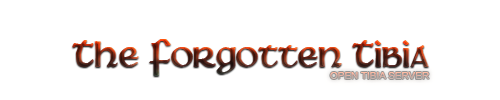
<style>
.page{position:relative;width:500px;height:100px;background:#ffffff}
.page>*{position:absolute;margin:0}
.t1{font:40px "Martel"}
.t2{font:9px "ArialMT";text-transform:uppercase;scale:1.11 1}
</style>
<div class="page">
<p class="t1" style="left:72px;top:39px;width:357px;height:37px">The Forgotten Tibia</p>
<p class="t2" style="left:330px;top:72px;width:99px;height:7px">open tibia server</p>
</div>
